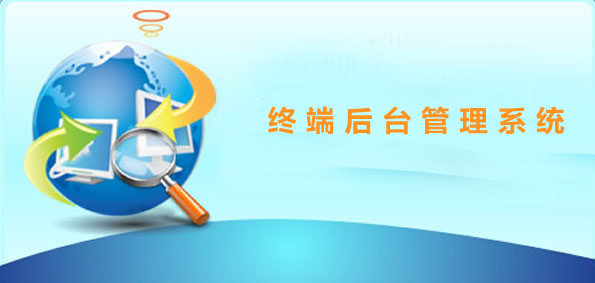
<style>
.page{position:relative;width:595px;height:283px}
.page>*{position:absolute;margin:0}
.t1{font:30px "FZLTCHJW--GB1-0";color:#ff9322}
</style>
<div class="page">
<p class="t1" style="left:268px;top:106px;width:297px;height:29px">终 端 后 台 管 理 系 统</p>
</div>
